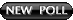
<style>
.page{position:relative;width:73px;height:20px}
.page>*{position:absolute;margin:0}
.t1{font:11px "Optima-Bold";color:#ffffff}
</style>
<div class="page">
<p class="t1" style="left:6px;top:6px;width:61px;height:9px">NEW  POLL</p>
</div>
